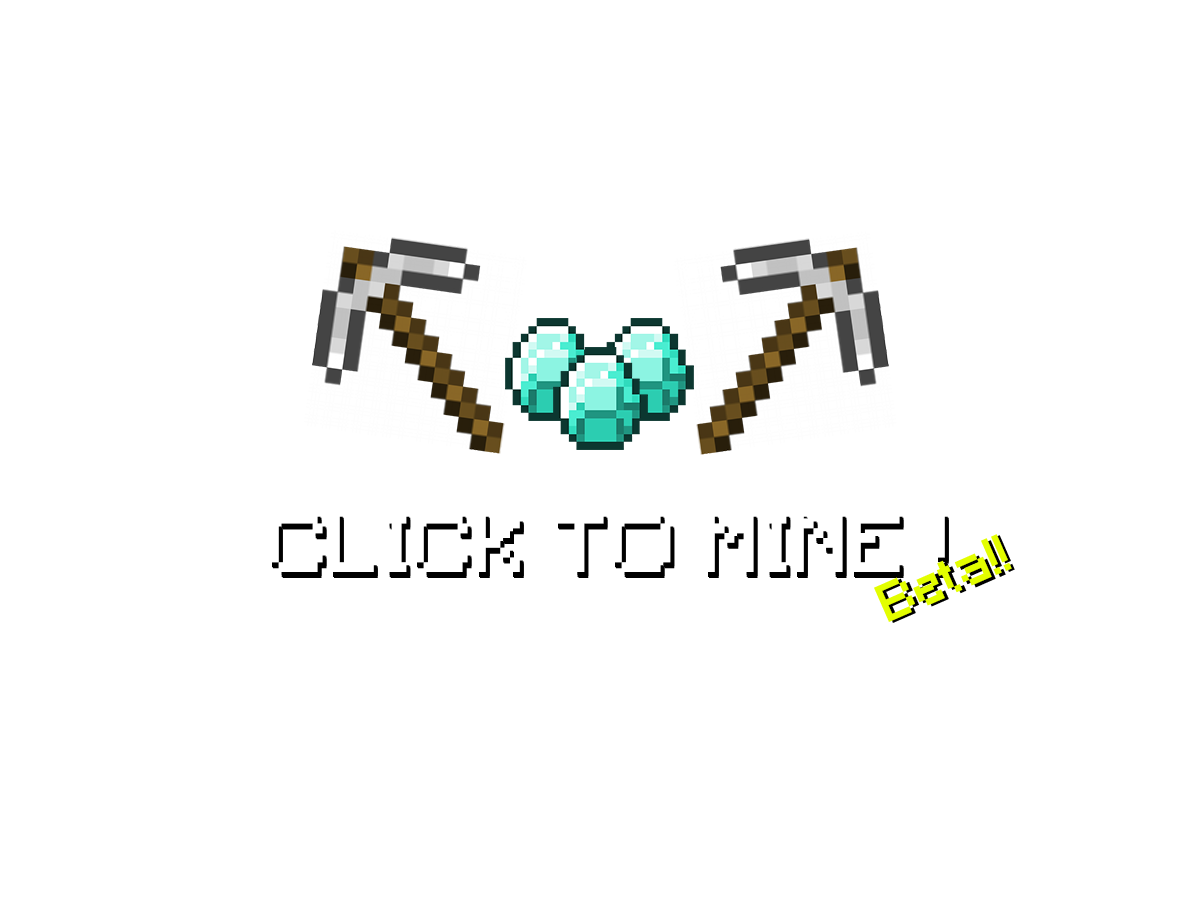
<style>
.page{position:relative;width:1200px;height:900px;background:#ffffff}
.page>*{position:absolute;margin:0}
.t1{font:77.8px "Minecraft";letter-spacing:0.04em}
.t2{font:50px "Minecraft";letter-spacing:0.02em;color:#e3fe00}
.t3{font:50px "Minecraft";letter-spacing:0.02em}
</style>
<div class="page">
<p class="t1" style="left:272px;top:518px;width:676px;height:59px">CLICK TO MINE !</p>
<p class="t1" style="left:273px;top:519px;width:676px;height:59px">CLICK TO MINE !</p>
<p class="t1" style="left:273px;top:517px;width:676px;height:59px">CLICK TO MINE !</p>
<p class="t2" style="left:874px;top:534px;width:138px;height:88px;rotate:-24deg">Beta!!</p>
<p class="t3" style="left:878px;top:535px;width:137px;height:88px;rotate:-24deg">Beta!!</p>
</div>
